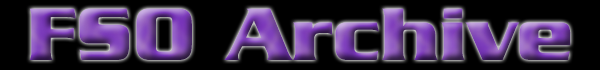
<style>
.page{position:relative;width:600px;height:70px;background:#000000}
.page>*{position:absolute;margin:0}
.t1{font:80px "Babylon5"}
</style>
<div class="page">
<p class="t1" style="left:29px;top:8px;width:542px;height:52px">FSO Archive</p>
</div>
